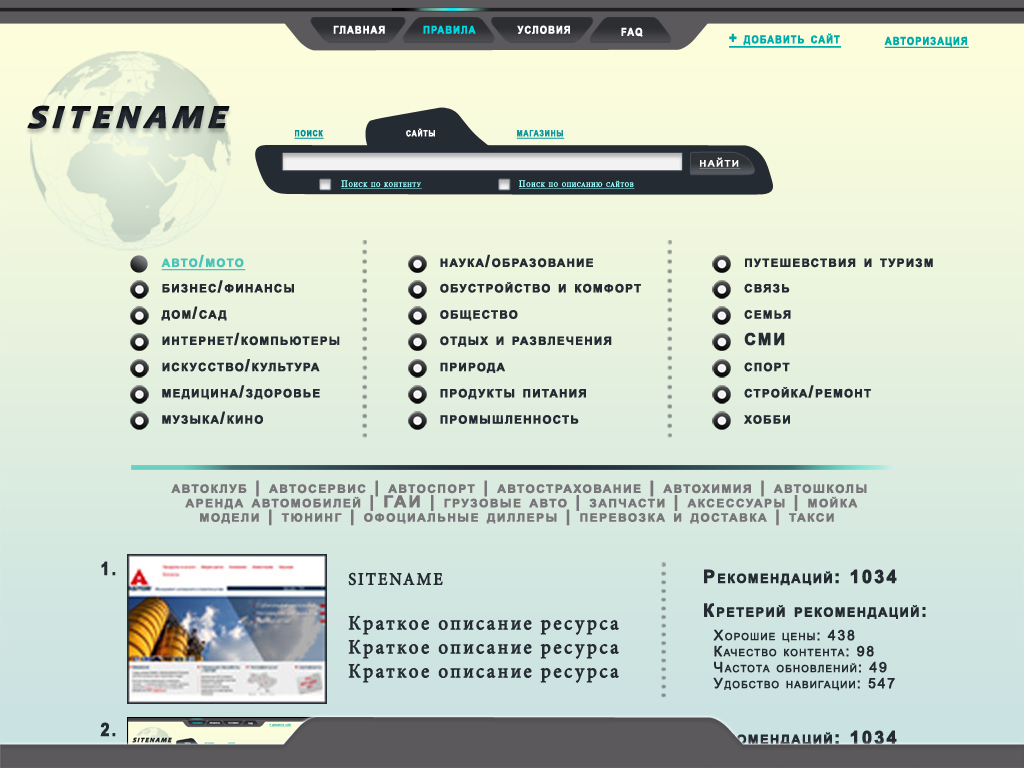
<style>
.page{position:relative;width:1024px;height:768px}
.page>*{position:absolute;margin:0}
.t1{font:15.3px "Arial-BoldMT";letter-spacing:0.1em;color:#ffffff;font-variant:small-caps;font-weight:bold;scale:0.86 1}
.t2{font:15.3px "Arial-BoldMT";letter-spacing:0.1em;color:#00d7e3;font-variant:small-caps;font-weight:bold;scale:0.86 1}
.t3{font:15.3px "Arial-BoldMT";letter-spacing:0.1em;color:#00abab;font-variant:small-caps;font-weight:bold;text-decoration:underline;scale:0.86 1}
.t4{font:40px "Candara-BoldItalic";letter-spacing:0.1em;color:#252b33;font-variant:small-caps;font-weight:bold;font-style:italic}
.t5{font:12.2px "Arial-BoldMT";letter-spacing:0.1em;color:#009199;font-variant:small-caps;font-weight:bold;text-decoration:underline;scale:0.81 1}
.t6{font:12.2px "Arial-BoldMT";letter-spacing:0.1em;color:#ffffff;font-variant:small-caps;font-weight:bold;scale:0.81 1}
.t7{font:12.2px "Arial-BoldMT";letter-spacing:0.1em;color:#11989d;font-variant:small-caps;font-weight:bold;text-decoration:underline;scale:0.81 1}
.t8{font:12px "Candara";letter-spacing:0.1em;color:#ffffff;font-variant:small-caps;font-weight:bold;text-decoration:underline}
.t9{font:9.4px "TimesNewRomanPSMT";letter-spacing:0.1em;color:#99ffff;font-variant:small-caps;font-weight:bold;text-decoration:underline;scale:0.89 1}
.t10{font:16.2px "Arial-BoldMT";letter-spacing:0.1em;color:#4ac3b9;font-variant:small-caps;font-weight:bold;text-decoration:underline}
.t11{font:16.2px "Arial-BoldMT";letter-spacing:0.1em;color:#252b33;font-variant:small-caps;font-weight:bold}
.t12{font:16.2px "Arial-BoldMT";letter-spacing:0.11em;color:#79767a;font-variant:small-caps;font-weight:bold;scale:1.04 1}
.t13{font:18px "Arial-BoldMT";letter-spacing:0.1em;color:#252b33;font-variant:small-caps;font-weight:bold;scale:0.9 1}
.t14{font:18px "Arial-BoldMT";letter-spacing:0.1em;color:#252b33;font-variant:small-caps;font-weight:bold}
.t15{font:20px/24px "MinionPro-Regular";letter-spacing:0.1em;color:#252b33;font-variant:small-caps;font-weight:bold;scale:0.95 1}
.t16{font:17.3px "MinionPro-Regular";letter-spacing:0.1em;color:#252b33;font-variant:small-caps;font-weight:bold;scale:0.95 1}
.t17{font:14px/16px "ArialMT";letter-spacing:0.1em;color:#252b33;font-variant:small-caps;font-weight:bold}
</style>
<div class="page">
<p class="t1" style="left:333px;top:25px;width:52px;height:9px">главная</p>
<p class="t2" style="left:423px;top:25px;width:53px;height:9px">правила</p>
<p class="t1" style="left:517px;top:25px;width:53px;height:9px">условия</p>
<p class="t1" style="left:621px;top:27px;width:22px;height:10px">faq</p>
<p class="t3" style="left:729px;top:33px;width:112px;height:15px">+ добавить сайт</p>
<p class="t3" style="left:884px;top:36px;width:85px;height:12px">авторизация</p>
<p class="t4" style="left:27px;top:105px;width:203px;height:24px">sitename</p>
<p class="t5" style="left:294px;top:129px;width:30px;height:10px">поиск</p>
<p class="t6" style="left:406px;top:128px;width:29px;height:9px">сайты</p>
<p class="t7" style="left:516px;top:129px;width:49px;height:10px">магазины</p>
<p class="t8" style="left:699px;top:157px;width:42px;height:12px">найти</p>
<p class="t9" style="left:341px;top:180px;width:81px;height:9px">Поиск по контенту</p>
<p class="t9" style="left:519px;top:180px;width:116px;height:9px">Поиск по описанию сайтов</p>
<p class="t10" style="left:161px;top:254px;width:85px;height:17px">авто/мото</p>
<p class="t11" style="left:440px;top:254px;width:153px;height:14px">наука/образование</p>
<p class="t11" style="left:745px;top:258px;width:188px;height:10px">путешевствия и туризм</p>
<p class="t11" style="left:162px;top:280px;width:132px;height:13px">бизнес/финансы</p>
<p class="t11" style="left:440px;top:282px;width:201px;height:11px">обустройство и комфорт</p>
<p class="t11" style="left:744px;top:283px;width:46px;height:10px">связь</p>
<p class="t11" style="left:161px;top:306px;width:66px;height:15px">дом/сад</p>
<p class="t11" style="left:440px;top:310px;width:78px;height:11px">общество</p>
<p class="t11" style="left:744px;top:310px;width:47px;height:9px">семья</p>
<p class="t11" style="left:162px;top:332px;width:178px;height:14px">интернет/компьютеры</p>
<p class="t11" style="left:440px;top:336px;width:172px;height:11px">отдых и развлечения</p>
<p class="t11" style="left:744px;top:332px;width:41px;height:14px">СМИ</p>
<p class="t11" style="left:162px;top:359px;width:158px;height:13px">искусство/культура</p>
<p class="t11" style="left:440px;top:362px;width:65px;height:11px">природа</p>
<p class="t11" style="left:744px;top:362px;width:46px;height:10px">спорт</p>
<p class="t11" style="left:162px;top:385px;width:158px;height:15px">медицина/здоровье</p>
<p class="t11" style="left:440px;top:388px;width:146px;height:12px">продукты питания</p>
<p class="t11" style="left:744px;top:385px;width:127px;height:13px">стройка/ремонт</p>
<p class="t11" style="left:162px;top:411px;width:101px;height:13px">музыка/кино</p>
<p class="t11" style="left:440px;top:415px;width:139px;height:9px">промышленность</p>
<p class="t11" style="left:744px;top:415px;width:46px;height:9px">хобби</p>
<p class="t12" style="left:171px;top:480px;width:696px;height:46px">автоклуб | автосервис | автоспорт | автострахование | автохимия | автошколы<br>  аренда автомобилей | ГАИ | грузовые авто | запчасти | аксессуары | мойка<br>    модели | тюнинг | офоциальные диллеры | перевозка и доставка | такси</p>
<p class="t13" style="left:101px;top:561px;width:15px;height:15px">1.</p>
<p class="t14" style="left:704px;top:569px;width:193px;height:17px">Рекомендаций: 1034</p>
<p class="t15" style="left:348px;top:572px;width:271px;height:111px"><span class="t16">SITENAME<br><br></span>Краткое описание ресурса<br>Краткое описание ресурса<br>Краткое описание ресурса</p>
<p class="t14" style="left:704px;top:603px;width:222px;height:16px">Кретерий рекомендаций:</p>
<p class="t17" style="left:713px;top:629px;width:182px;height:62px">Хорошие цены: 438<br>Качество контента: 98<br>Частота обновлений: 49<br>Удобство навигации: 547</p>
<p class="t13" style="left:100px;top:722px;width:16px;height:15px">2.</p>
<p class="t14" style="left:704px;top:730px;width:193px;height:17px">Рекомендаций: 1034</p>
</div>
